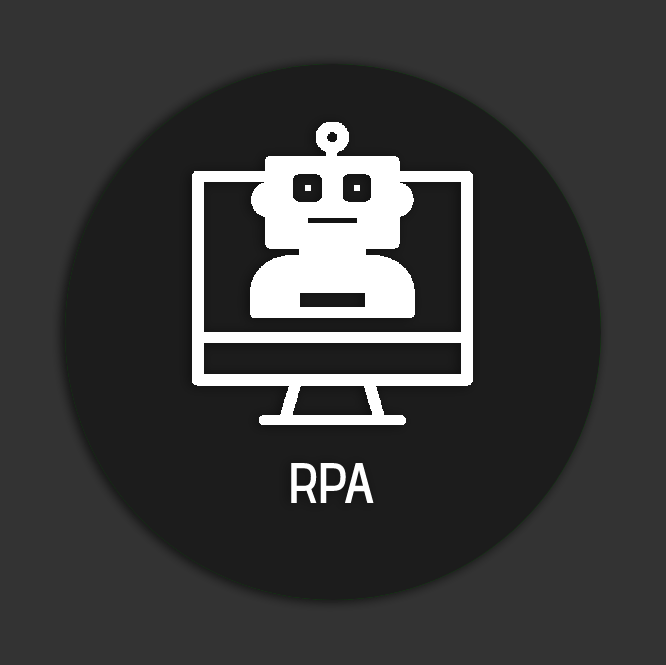
<style>
.page{position:relative;width:666px;height:665px;background:#333333}
.page>*{position:absolute;margin:0}
.t1{font:57px "AdventPro-SemiBold";color:#ffffff}
</style>
<div class="page">
<p class="t1" style="left:291px;top:463px;width:83px;height:40px">RPA</p>
</div>
